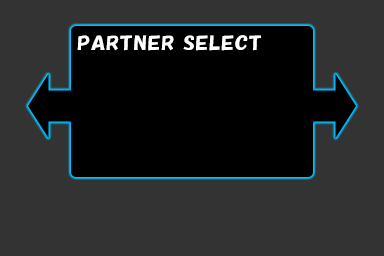
<style>
.page{position:relative;width:384px;height:256px;background:#333333}
.page>*{position:absolute;margin:0}
.t1{font:18px "HGPSoeiKakupoptai";letter-spacing:0.05em;color:#fefefe;scale:1.15 1}
</style>
<div class="page">
<p class="t1" style="left:77px;top:35px;width:184px;height:16px">PARTNER SELECT</p>
</div>
